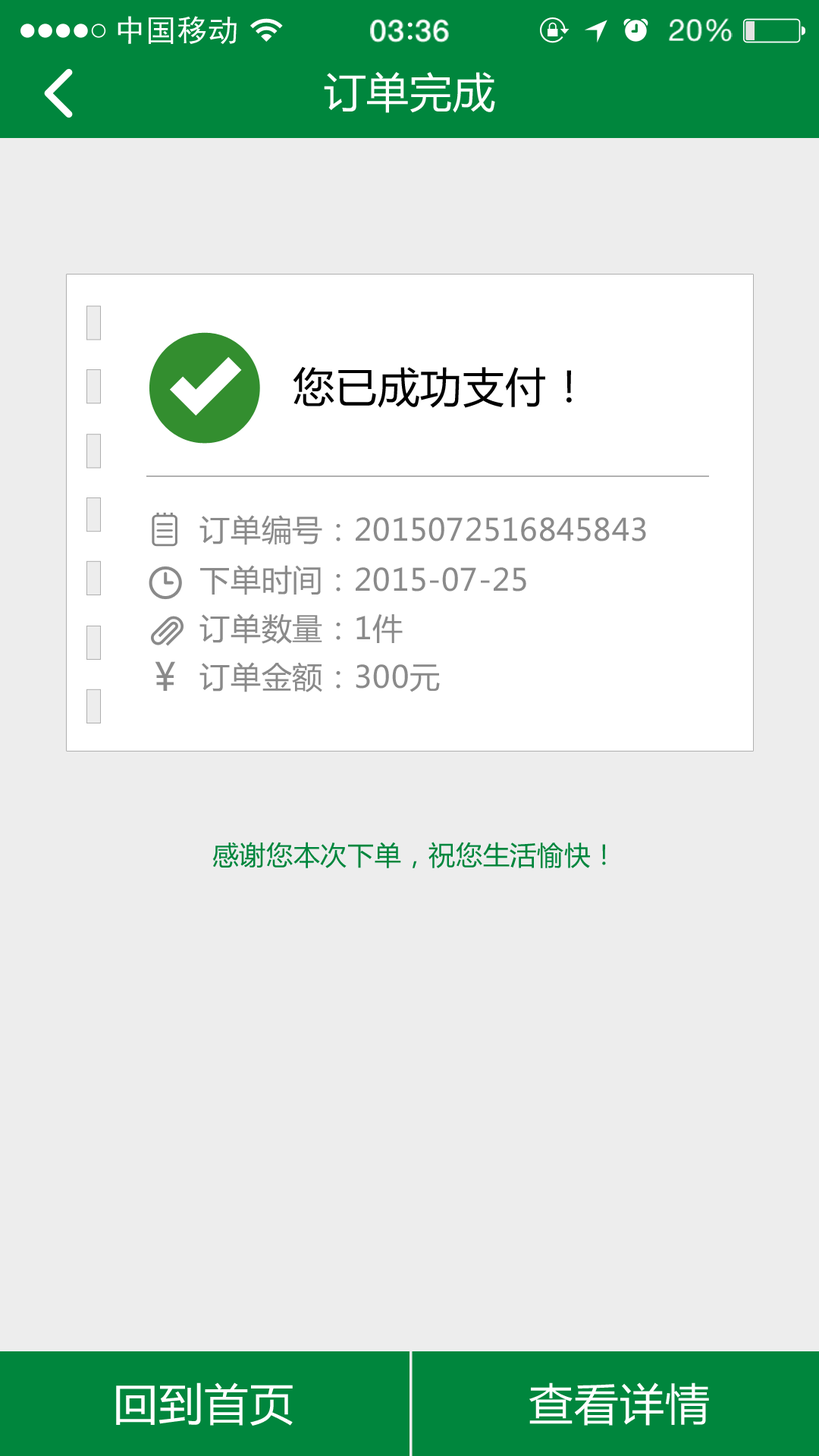
<style>
.page{position:relative;width:819px;height:1456px;background:#ededed}
.page>*{position:absolute;margin:0}
.t1{font:41.7px "MicrosoftYaHei";letter-spacing:0.02em;color:#ffffff}
.t2{font:41.7px "MicrosoftYaHei";letter-spacing:0.02em;color:#000000}
.t3{font:30.3px "MicrosoftYaHei";letter-spacing:0.02em;color:#8a8a8a}
.t4{font:38.4px "MicrosoftYaHei";letter-spacing:0.02em;color:#8a8a8a}
.t5{font:26.5px "MicrosoftYaHei";letter-spacing:0.02em;color:#00863d}
.t6{font:44px "MicrosoftYaHei";letter-spacing:0.02em;color:#ffffff}
</style>
<div class="page">
<p class="t1" style="left:324px;top:71px;width:171px;height:42px">订单完成</p>
<p class="t2" style="left:293px;top:366px;width:279px;height:42px">您已成功支付！</p>
<p class="t3" style="left:199px;top:515px;width:447px;height:30px">订单编号：2015072516845843</p>
<p class="t3" style="left:200px;top:565px;width:326px;height:30px">下单时间：2015-07-25</p>
<p class="t3" style="left:199px;top:613px;width:204px;height:31px">订单数量：1件</p>
<p class="t4" style="left:155px;top:661px;width:20px;height:30px">¥</p>
<p class="t3" style="left:199px;top:662px;width:241px;height:30px">订单金额：300元</p>
<p class="t5" style="left:212px;top:842px;width:394px;height:26px">感谢您本次下单，祝您生活愉快！</p>
<p class="t6" style="left:116px;top:1382px;width:177px;height:44px">回到首页</p>
<p class="t6" style="left:529px;top:1382px;width:180px;height:44px">查看详情</p>
</div>
